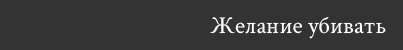
<style>
.page{position:relative;width:403px;height:50px;background:#333333}
.page>*{position:absolute;margin:0}
.t1{font:24px "CrimsonText-Regular";color:#ffffff}
</style>
<div class="page">
<p class="t1" style="left:210px;top:16px;width:176px;height:23px">Желание убивать</p>
</div>
